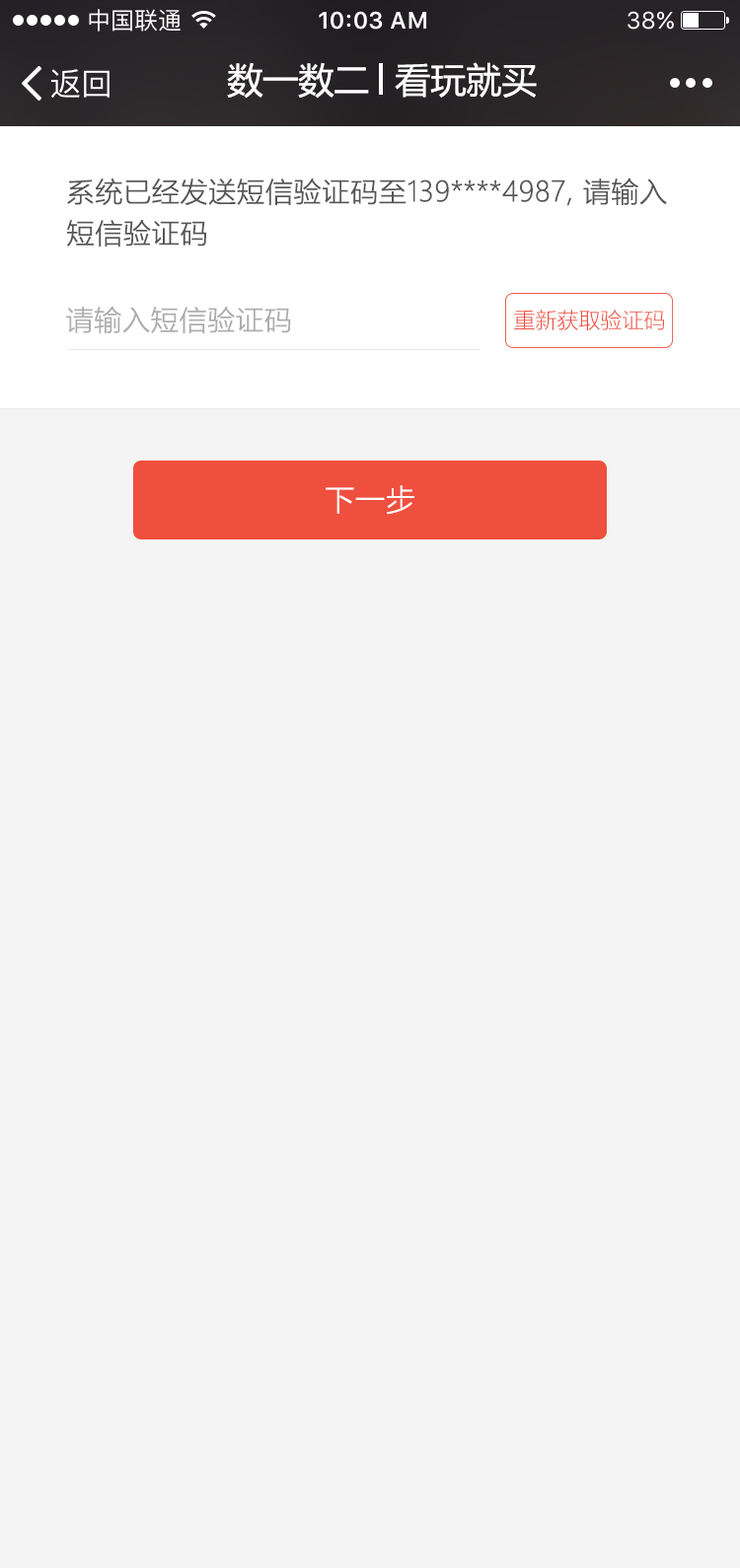
<style>
.page{position:relative;width:740px;height:1568px;background:#f4f4f4}
.page>*{position:absolute;margin:0}
.t1{font:35.5px "MicrosoftYaHei";color:#ffffff}
.t2{font:27.6px/41.4px "MicrosoftYaHeiLight";color:#555555;font-weight:bold}
.t3{font:27.6px "MicrosoftYaHeiLight";color:#adadad;font-weight:bold}
.t4{font:21.7px "MicrosoftYaHeiLight";color:#ef4f3e}
.t5{font:29.6px "MicrosoftYaHeiLight";color:#ffffff;font-weight:bold}
</style>
<div class="page">
<p class="t1" style="left:227px;top:62px;width:142px;height:37px">数一数二</p>
<p class="t1" style="left:394px;top:62px;width:142px;height:36px">看玩就买</p>
<p class="t2" style="left:67px;top:178px;width:600px;height:69px">系统已经发送短信验证码至139****4987, 请输入<br>短信验证码</p>
<p class="t3" style="left:66px;top:306px;width:225px;height:27px">请输入短信验证码</p>
<p class="t4" style="left:514px;top:310px;width:150px;height:20px">重新获取验证码</p>
<p class="t5" style="left:325px;top:485px;width:89px;height:30px">下一步</p>
</div>
